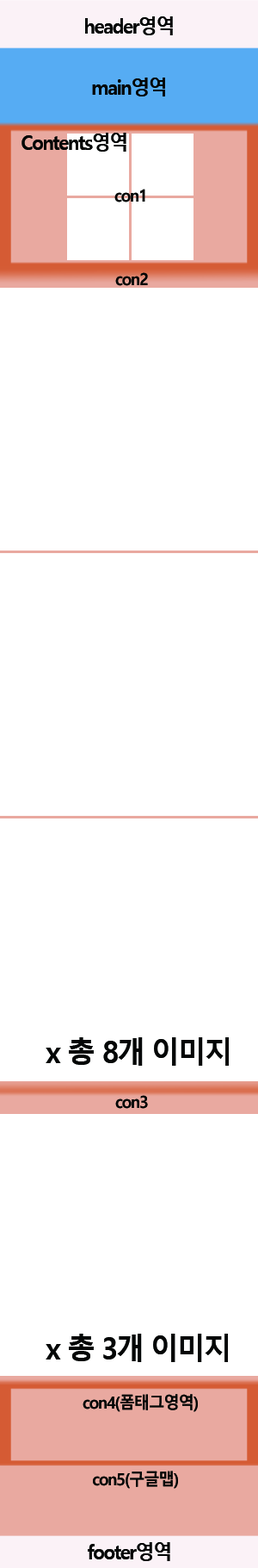
<style>
.page{position:relative;width:258px;height:1568px;background:#ffffff}
.page>*{position:absolute;margin:0}
.t1{font:20.1px "MalgunGothicBold";letter-spacing:-0.07em;color:#040606;scale:0.95 1}
.t2{font:16.8px "MalgunGothicBold";letter-spacing:-0.07em;color:#040606;scale:0.95 1}
.t3{font:30.2px "MalgunGothicBold";letter-spacing:-0.07em;color:#040606;scale:0.95 1}
</style>
<div class="page">
<p class="t1" style="left:85px;top:16px;width:88px;height:19px">header영역</p>
<p class="t1" style="left:92px;top:78px;width:73px;height:18px">main영역</p>
<p class="t1" style="left:22px;top:133px;width:105px;height:19px">Contents영역</p>
<p class="t2" style="left:115px;top:189px;width:31px;height:13px">con1</p>
<p class="t2" style="left:115px;top:272px;width:33px;height:14px">con2</p>
<p class="t3" style="left:46px;top:1037px;width:183px;height:29px">x 총 8개 이미지</p>
<p class="t2" style="left:115px;top:1095px;width:33px;height:14px">con3</p>
<p class="t3" style="left:46px;top:1334px;width:182px;height:28px">x 총 3개 이미지</p>
<p class="t2" style="left:83px;top:1394px;width:115px;height:18px">con4(폼태그영역)</p>
<p class="t2" style="left:93px;top:1471px;width:85px;height:18px">con5(구글맵)</p>
<p class="t1" style="left:88px;top:1542px;width:83px;height:19px">footer영역</p>
</div>
